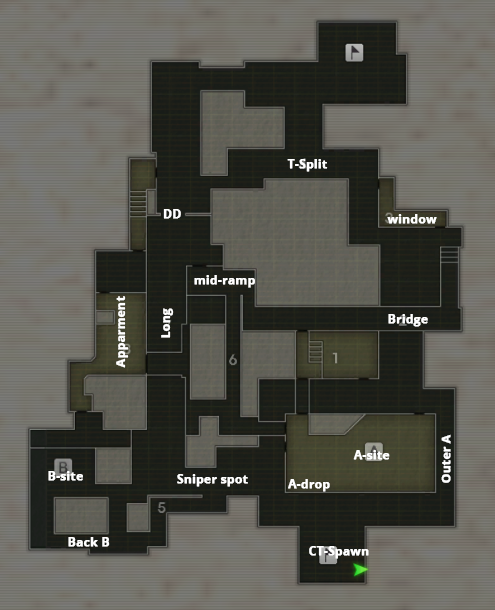
<style>
.page{position:relative;width:495px;height:610px}
.page>*{position:absolute;margin:0}
.t1{font:12px "OpenSans-Bold";color:#ffffff;font-weight:bold}
</style>
<div class="page">
<p class="t1" style="left:287px;top:159px;width:41px;height:13px">T-Split</p>
<p class="t1" style="left:163px;top:209px;width:18px;height:10px">DD</p>
<p class="t1" style="left:387px;top:214px;width:50px;height:10px">window</p>
<p class="t1" style="left:194px;top:275px;width:61px;height:13px">mid-ramp</p>
<p class="t1" style="left:116px;top:296px;width:13px;height:72px;rotate:-90deg">Apparment</p>
<p class="t1" style="left:161px;top:308px;width:13px;height:30px;rotate:-90deg">Long</p>
<p class="t1" style="left:388px;top:314px;width:40px;height:13px">Bridge</p>
<p class="t1" style="left:441px;top:434px;width:10px;height:49px;rotate:-90deg">Outer A</p>
<p class="t1" style="left:353px;top:450px;width:37px;height:10px">A-site</p>
<p class="t1" style="left:48px;top:471px;width:35px;height:10px">B-site</p>
<p class="t1" style="left:177px;top:474px;width:71px;height:13px">Sniper spot</p>
<p class="t1" style="left:288px;top:479px;width:42px;height:13px">A-drop</p>
<p class="t1" style="left:68px;top:537px;width:42px;height:10px">Back B</p>
<p class="t1" style="left:309px;top:546px;width:60px;height:13px">CT-Spawn</p>
</div>
